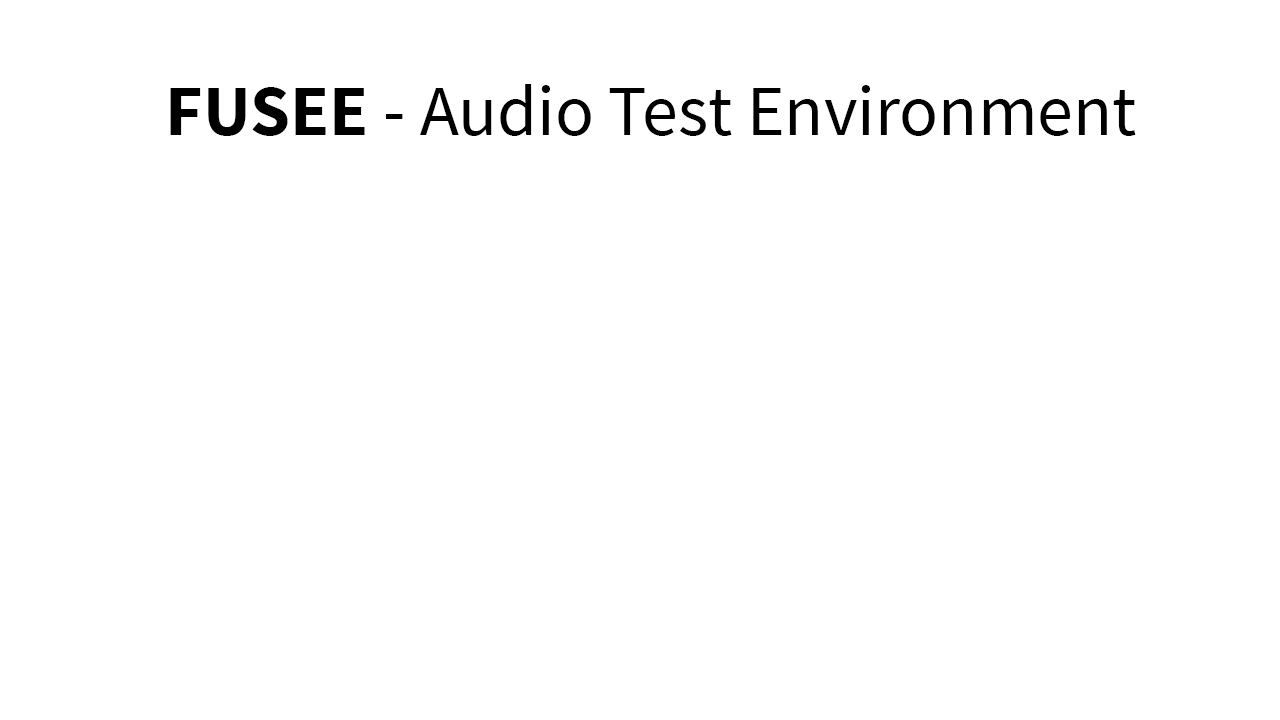
<style>
.page{position:relative;width:1280px;height:720px;background:#ffffff}
.page>*{position:absolute;margin:0}
.t1{font:72px "SourceSansPro-Regular";color:#000000}
.t2{font:72px "SourceSansPro-Bold";color:#000000}
</style>
<div class="page">
<p class="t1" style="left:170px;top:84px;width:966px;height:52px"><span class="t2">FUSEE</span> - Audio Test Environment</p>
</div>
